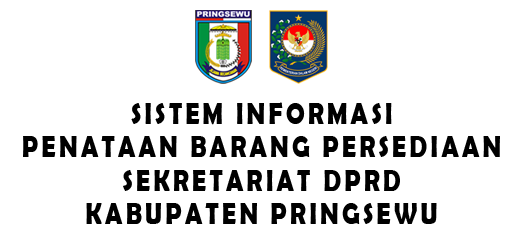
<style>
.page{position:relative;width:509px;height:250px;background:#ffffff}
.page>*{position:absolute;margin:0}
.t1{font:30.7px/33.5px "BerlinSansFBDemi-Bold";letter-spacing:0.135em;color:#000000;text-transform:uppercase;scale:0.81 1}
</style>
<div class="page">
<p class="t1" style="left:23px;top:102px;width:477px;height:122px;text-align:center">SISTEM INFORMASI<br>PENATAAN BARANG PERSEDIAAN<br>SEKRETARIAT DPRD<br>KABUPATEN PRINGSEWU</p>
</div>
